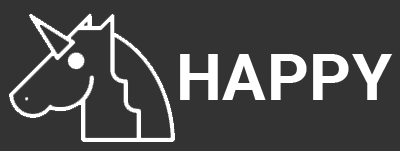
<style>
.page{position:relative;width:400px;height:151px;background:#333333}
.page>*{position:absolute;margin:0}
.t1{font:65px "Roboto-Bold";letter-spacing:0.01em;color:#ffffff}
</style>
<div class="page">
<p class="t1" style="left:180px;top:54px;width:213px;height:46px">HAPPY</p>
</div>
